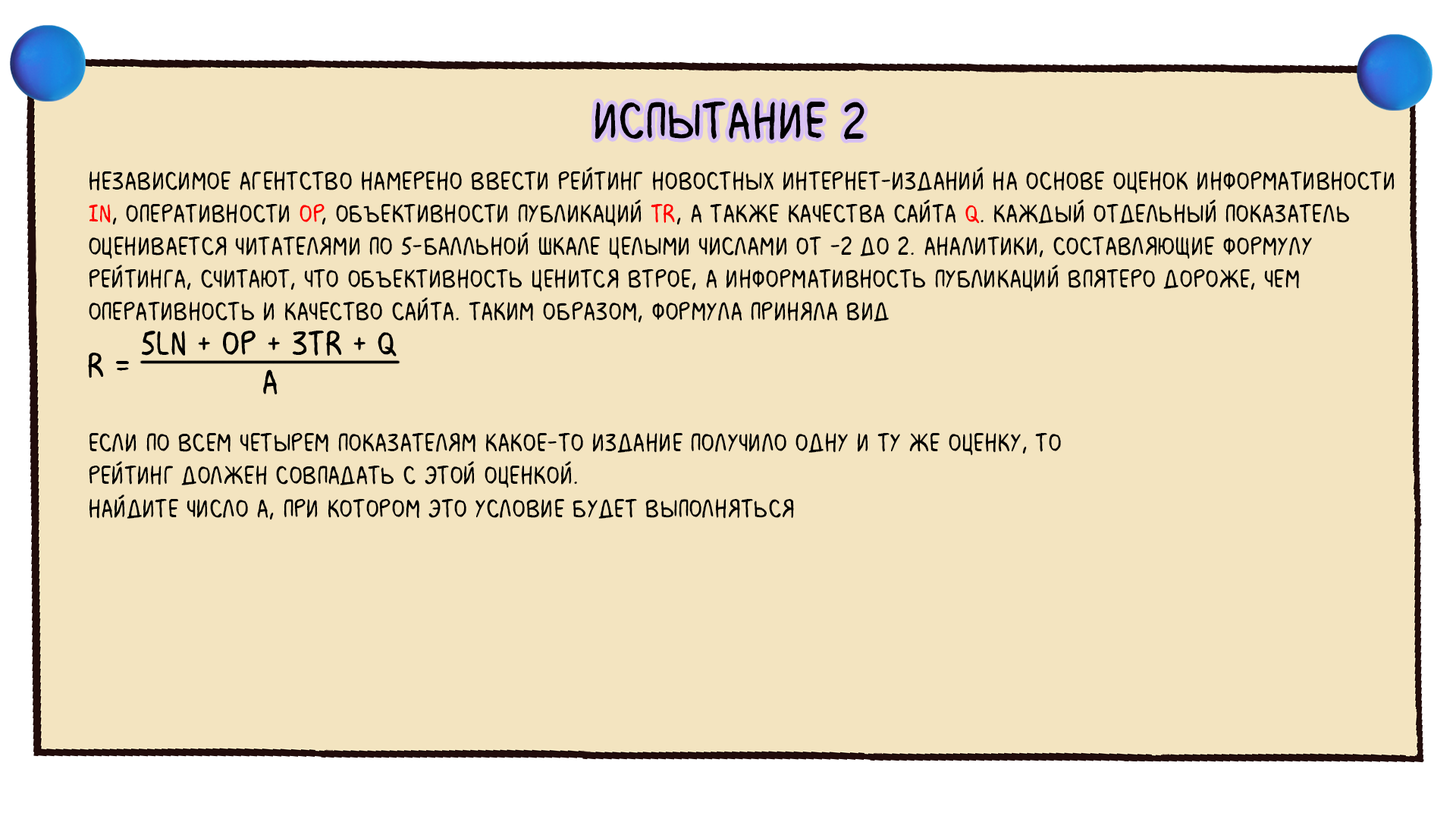
<style>
.page{position:relative;width:1456px;height:819px;background:#f3e4c0}
.page>*{position:absolute;margin:0}
.t1{font:54.6px "MilkMustacheBB";color:#000000}
.t2{font:27.3px "MilkMustacheBB";color:#000000}
.t3{font:27.3px "MilkMustacheBB";color:#ff0000}
.t4{font:27.3px "MilkMustacheBB";color:#fe0000}
</style>
<div class="page">
<p class="t1" style="left:595px;top:101px;width:269px;height:39px">испытание 2</p>
<p class="t2" style="left:89px;top:167px;width:1306px;height:353px">Независимое агентство намерено ввести рейтинг новостных интернет-изданий на основе оценок информативности <br><span class="t3">In</span>, оперативности <span class="t3">Op</span>, объективности публикаций <span class="t4">Tr</span>, а также качества сайта <span class="t3">Q</span>. Каждый отдельный показатель <br>оценивается читателями по 5-балльной шкале целыми числами от -2 до 2. Аналитики, составляющие формулу <br>рейтинга, считают, что объективность ценится втрое, а информативность публикаций впятеро дороже, чем <br>оперативность и качество сайта. Таким образом, формула приняла вид <br><br><br><br>Если по всем четырем показателям какое-то издание получило одну и ту же оценку, то <br>рейтинг должен совпадать с этой оценкой. <br>Найдите число A, при котором это условие будет выполняться</p>
</div>
